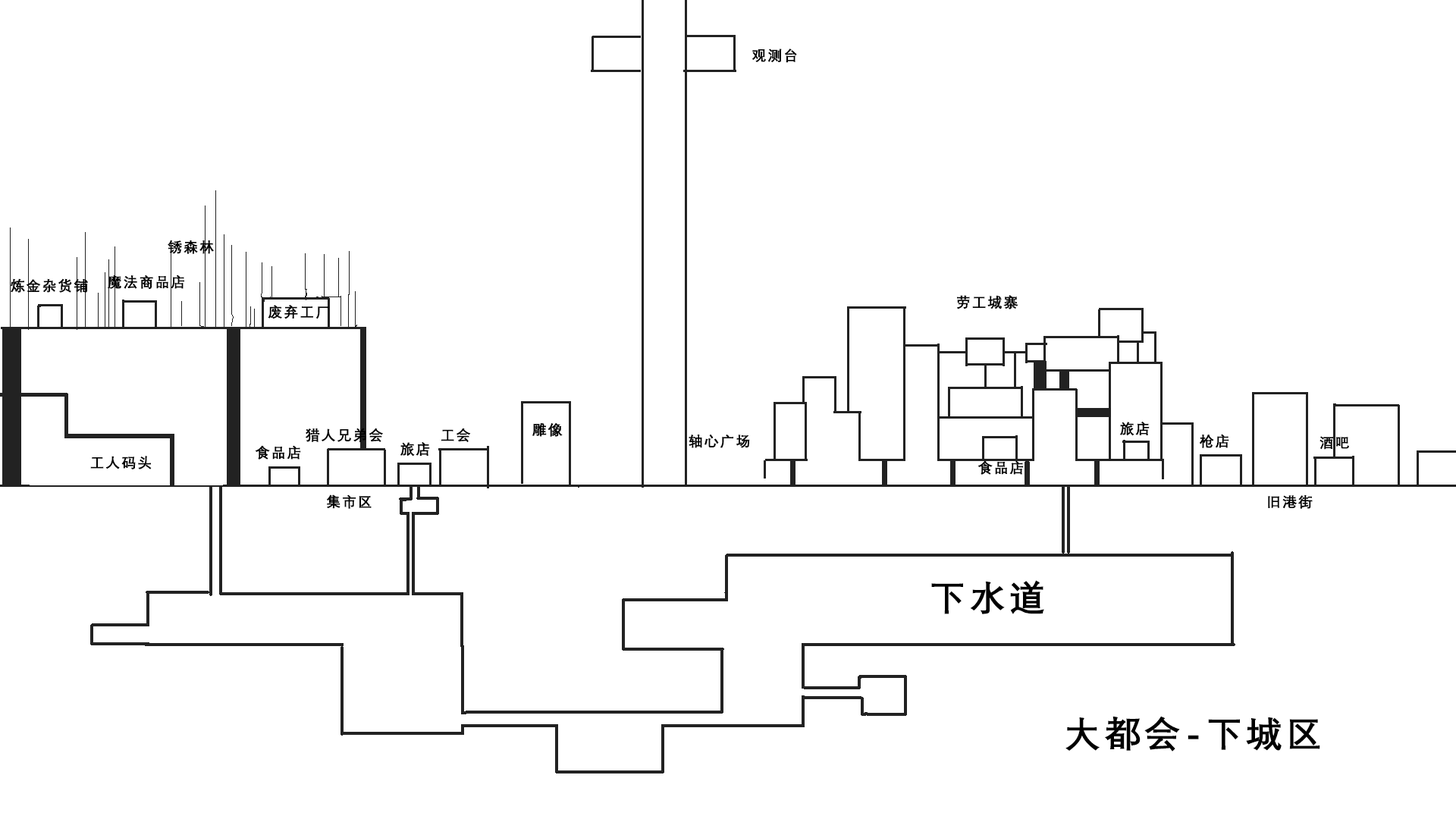
<style>
.page{position:relative;width:1456px;height:819px;background:#ffffff}
.page>*{position:absolute;margin:0}
.t1{font:14.4px "DengXian-Bold";letter-spacing:0.1em;color:#000000}
.t2{font:36.4px "DengXian-Bold";letter-spacing:0.1em;color:#000000}
</style>
<div class="page">
<p class="t1" style="left:751px;top:49px;width:46px;height:14px">观测台</p>
<p class="t1" style="left:168px;top:240px;width:46px;height:14px">锈森林</p>
<p class="t1" style="left:11px;top:278px;width:77px;height:15px">炼金杂货铺</p>
<p class="t1" style="left:108px;top:275px;width:76px;height:14px">魔法商品店</p>
<p class="t1" style="left:268px;top:305px;width:61px;height:14px">废弃工厂</p>
<p class="t1" style="left:957px;top:295px;width:61px;height:14px">劳工城寨</p>
<p class="t1" style="left:532px;top:422px;width:31px;height:15px">雕像</p>
<p class="t1" style="left:1119px;top:422px;width:31px;height:14px">旅店</p>
<p class="t1" style="left:306px;top:428px;width:77px;height:14px">猎人兄弟会</p>
<p class="t1" style="left:441px;top:428px;width:30px;height:14px">工会</p>
<p class="t1" style="left:689px;top:434px;width:61px;height:14px">轴心广场</p>
<p class="t1" style="left:1199px;top:434px;width:30px;height:14px">枪店</p>
<p class="t1" style="left:1319px;top:436px;width:30px;height:14px">酒吧</p>
<p class="t1" style="left:255px;top:445px;width:46px;height:15px">食品店</p>
<p class="t1" style="left:400px;top:442px;width:30px;height:15px">旅店</p>
<p class="t1" style="left:90px;top:456px;width:62px;height:13px">工人码头</p>
<p class="t1" style="left:977px;top:460px;width:47px;height:15px">食品店</p>
<p class="t1" style="left:326px;top:494px;width:46px;height:15px">集市区</p>
<p class="t1" style="left:1268px;top:494px;width:45px;height:15px">旧港街</p>
<p class="t2" style="left:931px;top:580px;width:113px;height:34px">下水道</p>
<p class="t2" style="left:1065px;top:716px;width:255px;height:35px">大都会-下城区</p>
</div>
